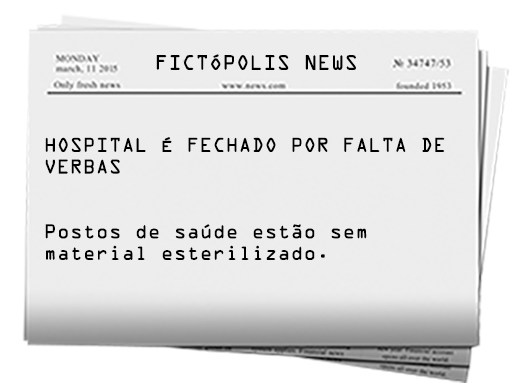
<style>
.page{position:relative;width:512px;height:387px;background:#ededed}
.page>*{position:absolute;margin:0}
.t1{font:18.8px "OCRAStd";color:#000000}
.t2{font:18px "OCRAStd";color:#000000}
</style>
<div class="page">
<p class="t1" style="left:156px;top:54px;width:200px;height:16px">FICTÓPOLIS NEWS</p>
<p class="t2" style="left:45px;top:137px;width:400px;height:123px">HOSPITAL É FECHADO POR FALTA DE <br>VERBAS<br><br><br>Postos de saúde estão sem <br>material esterilizado.</p>
</div>
